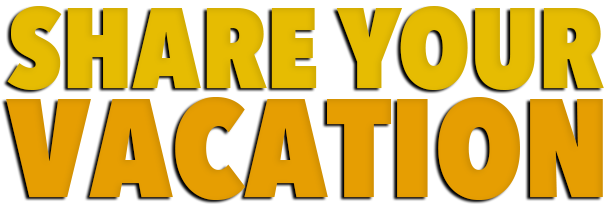
<style>
.page{position:relative;width:610px;height:206px;background:#ffffff}
.page>*{position:absolute;margin:0}
.t1{font:112.9px "AvenirNextCondensed-Heavy";color:#e6bc02}
.t2{font:137.6px "AvenirNextCondensed-Heavy";color:#e69e02}
</style>
<div class="page">
<p class="t1" style="left:7px;top:6px;width:597px;height:84px">SHARE YOUR</p>
<p class="t2" style="left:6px;top:97px;width:597px;height:103px">VACATION</p>
</div>
